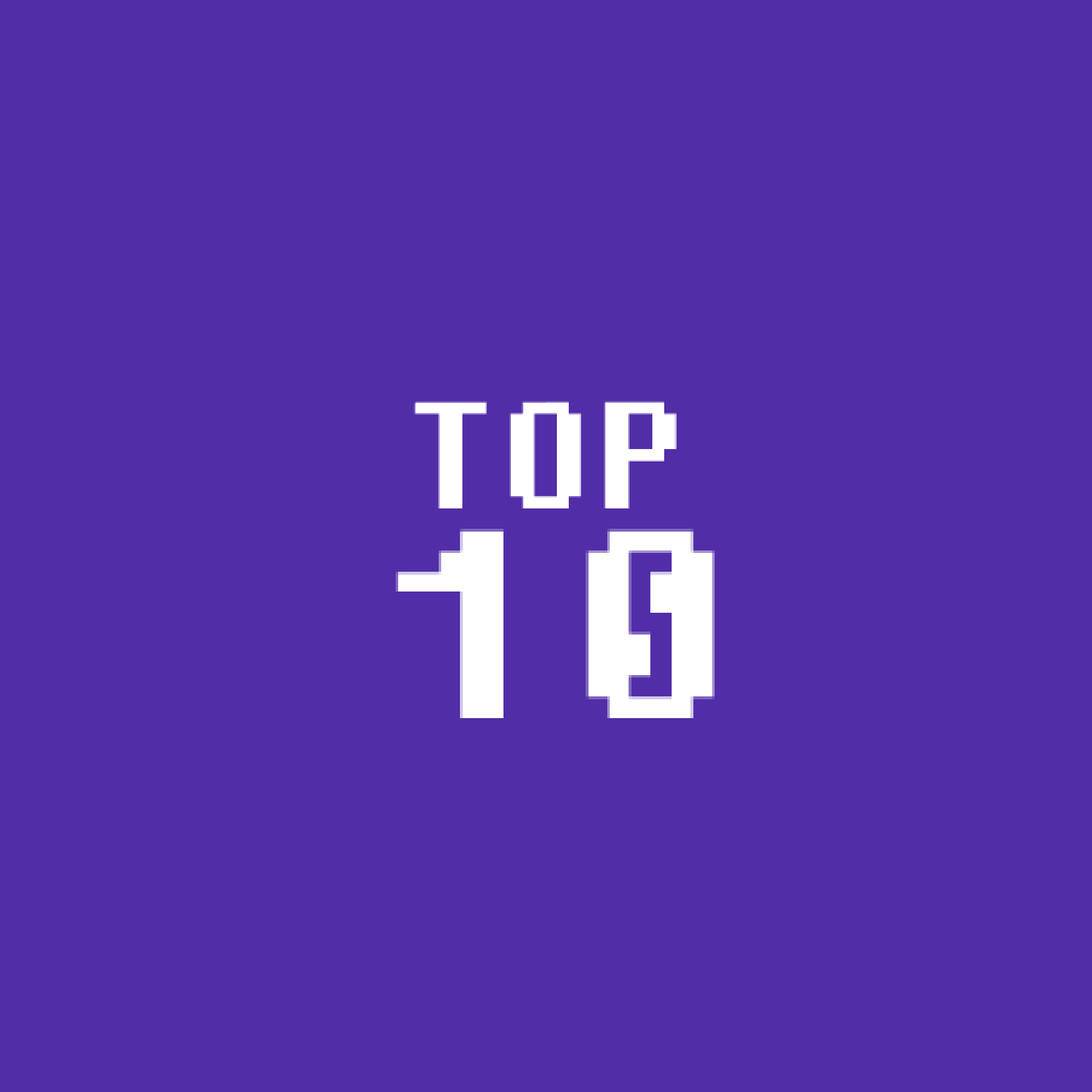
<style>
.page{position:relative;width:1092px;height:1092px;background:#512da8}
.page>*{position:absolute;margin:0}
.t1{font:151.3px "Fixedsys";color:#ffffff}
.t2{font:269.3px "Fixedsys";color:#ffffff}
</style>
<div class="page">
<p class="t1" style="left:414px;top:401px;width:263px;height:107px">TOP</p>
<p class="t2" style="left:396px;top:529px;width:319px;height:189px">10</p>
</div>
